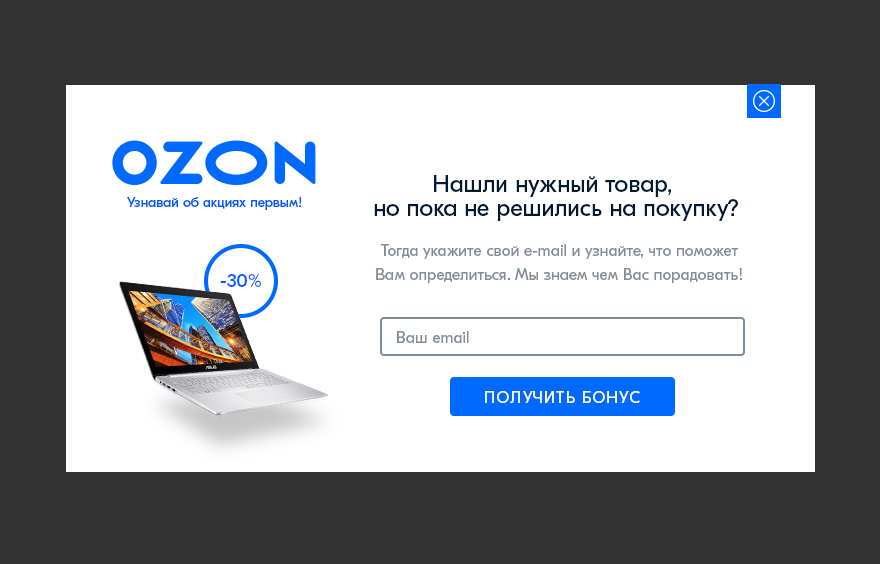
<style>
.page{position:relative;width:880px;height:564px;background:#ffffff}
.page>*{position:absolute;margin:0}
.t1{font:24px/24.1px "GTEestiProDisplay-Regular";color:#001a34}
.t2{font:14px "GTEestiProDisplay-Regular";color:#005bff}
.t3{font:16px/24px "GTEestiProDisplay-Regular";color:#808d9a}
.t4{font:19.2px "GTEestiProDisplay-Regular";color:#005bff}
.t5{font:16px "GTEestiProDisplay-Regular";color:#808d9a}
.t6{font:16px "GTEestiProDisplay-Regular";letter-spacing:0.075em;color:#ffffff}
</style>
<div class="page">
<p class="t1" style="left:374px;top:175px;width:364px;height:46px;text-align:center">Нашли нужный товар, <br>но пока не решились на покупку?</p>
<p class="t2" style="left:127px;top:197px;width:175px;height:13px">Узнавай об акциях первым!</p>
<p class="t3" style="left:376px;top:244px;width:366px;height:39px;text-align:center">Тогда укажите свой e-mail и узнайте, что поможет Вам определиться. Мы знаем чем Вас порадовать!</p>
<p class="t4" style="left:220px;top:274px;width:41px;height:13px">-30%</p>
<p class="t5" style="left:397px;top:331px;width:72px;height:12px">Ваш email</p>
<p class="t6" style="left:485px;top:391px;width:155px;height:12px">ПОЛУЧИТЬ БОНУС</p>
</div>
